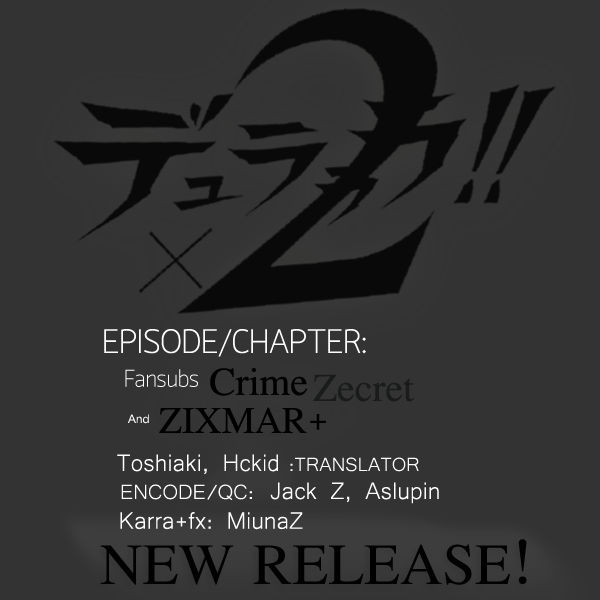
<style>
.page{position:relative;width:600px;height:600px;background:#333333}
.page>*{position:absolute;margin:0}
.t1{font:33.3px "Quark-Light";color:#ffffff}
.t2{font:23.9px "Quark-Light";color:#ffffff}
.t3{font:58px "EucrosiaUPC";color:#000000}
.t4{font:58px "EucrosiaUPC";color:#1a1c1c}
.t5{font:18px "CordiaNew";color:#ffffff}
.t6{font:54.9px "EucrosiaUPC";color:#000000}
.t7{font:30.5px "Microsoft-Yi-Baiti";color:#ffffff}
.t8{font:24.5px "Microsoft-Yi-Baiti";color:#ffffff}
.t9{font:26.5px "Microsoft-Yi-Baiti";color:#ffffff}
.t10{font:85.5px "EucrosiaUPC";color:#000000}
</style>
<div class="page">
<p class="t1" style="left:104px;top:329px;width:262px;height:28px">EPISODE/CHAPTER:</p>
<p class="t2" style="left:125px;top:369px;width:73px;height:18px">Fansubs</p>
<p class="t3" style="left:210px;top:368px;width:98px;height:28px">Crime</p>
<p class="t4" style="left:313px;top:374px;width:102px;height:28px">Zecret</p>
<p class="t5" style="left:128px;top:414px;width:21px;height:10px">And</p>
<p class="t6" style="left:159px;top:407px;width:167px;height:26px">ZIXMAR+</p>
<p class="t7" style="left:117px;top:454px;width:161px;height:21px">Toshiaki, Hckid</p>
<p class="t8" style="left:290px;top:457px;width:129px;height:15px">:TRANSLATOR</p>
<p class="t9" style="left:121px;top:484px;width:131px;height:16px">ENCODE/QC:</p>
<p class="t7" style="left:270px;top:482px;width:169px;height:22px">Jack Z, Aslupin</p>
<p class="t7" style="left:120px;top:512px;width:183px;height:18px">Karra+fx: MiunaZ</p>
<p class="t10" style="left:100px;top:539px;width:427px;height:46px">NEW RELEASE!</p>
</div>
